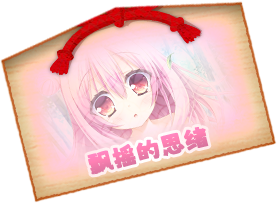
<style>
.page{position:relative;width:277px;height:203px;background:#ffffff}
.page>*{position:absolute;margin:0}
.t1{font:24px "MaokenAssortedSans";color:#f57dad;font-weight:bold}
</style>
<div class="page">
<p class="t1" style="left:87px;top:127px;width:122px;height:48px;rotate:-14deg">飘摇的思绪</p>
</div>
